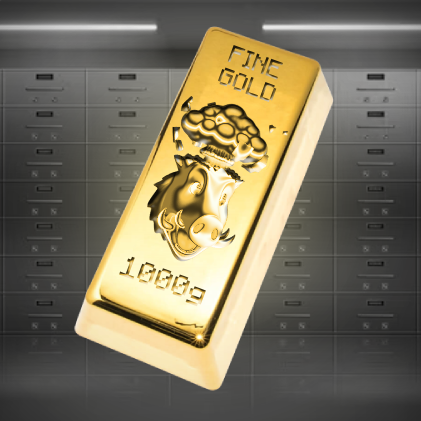
<style>
.page{position:relative;width:421px;height:421px}
.page>*{position:absolute;margin:0}
.t1{font:20px "F77-Minecraft"}
.t2{font:24px "F77-Minecraft"}
</style>
<div class="page">
<p class="t1" style="left:218px;top:45px;width:65px;height:57px;text-align:center;rotate:20deg">FINE<br>GOLD</p>
<p class="t2" style="left:119px;top:256px;width:87px;height:51px;rotate:20deg">1000g</p>
</div>
